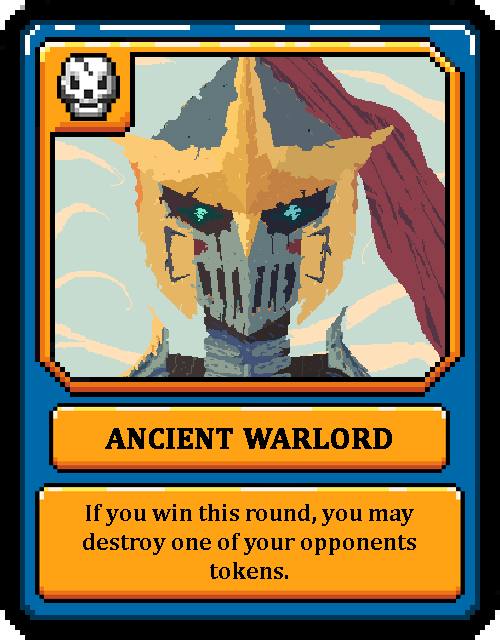
<style>
.page{position:relative;width:500px;height:640px;background:#000000}
.page>*{position:absolute;margin:0}
.t1{font:30px "Cambria-Bold";color:#000000;text-transform:uppercase;font-weight:bold}
.t2{font:24px "Cambria-Bold";color:#000000}
</style>
<div class="page">
<p class="t1" style="left:105px;top:428px;width:287px;height:21px">Ancient Warlord</p>
<p class="t2" style="left:83px;top:504px;width:333px;height:75px;text-align:center">If you win this round, you may destroy one of your opponents tokens.</p>
</div>
